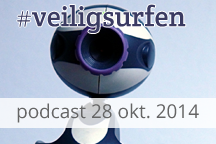
<style>
.page{position:relative;width:216px;height:144px}
.page>*{position:absolute;margin:0}
.t1{font:28.5px "CreteRound-Regular";color:#3b3b61}
.t2{font:19px "OpenSans";color:#656565}
</style>
<div class="page">
<p class="t1" style="left:17px;top:4px;width:169px;height:29px">#veiligsurfen</p>
<p class="t2" style="left:17px;top:103px;width:182px;height:20px">podcast 28 okt. 2014</p>
</div>
